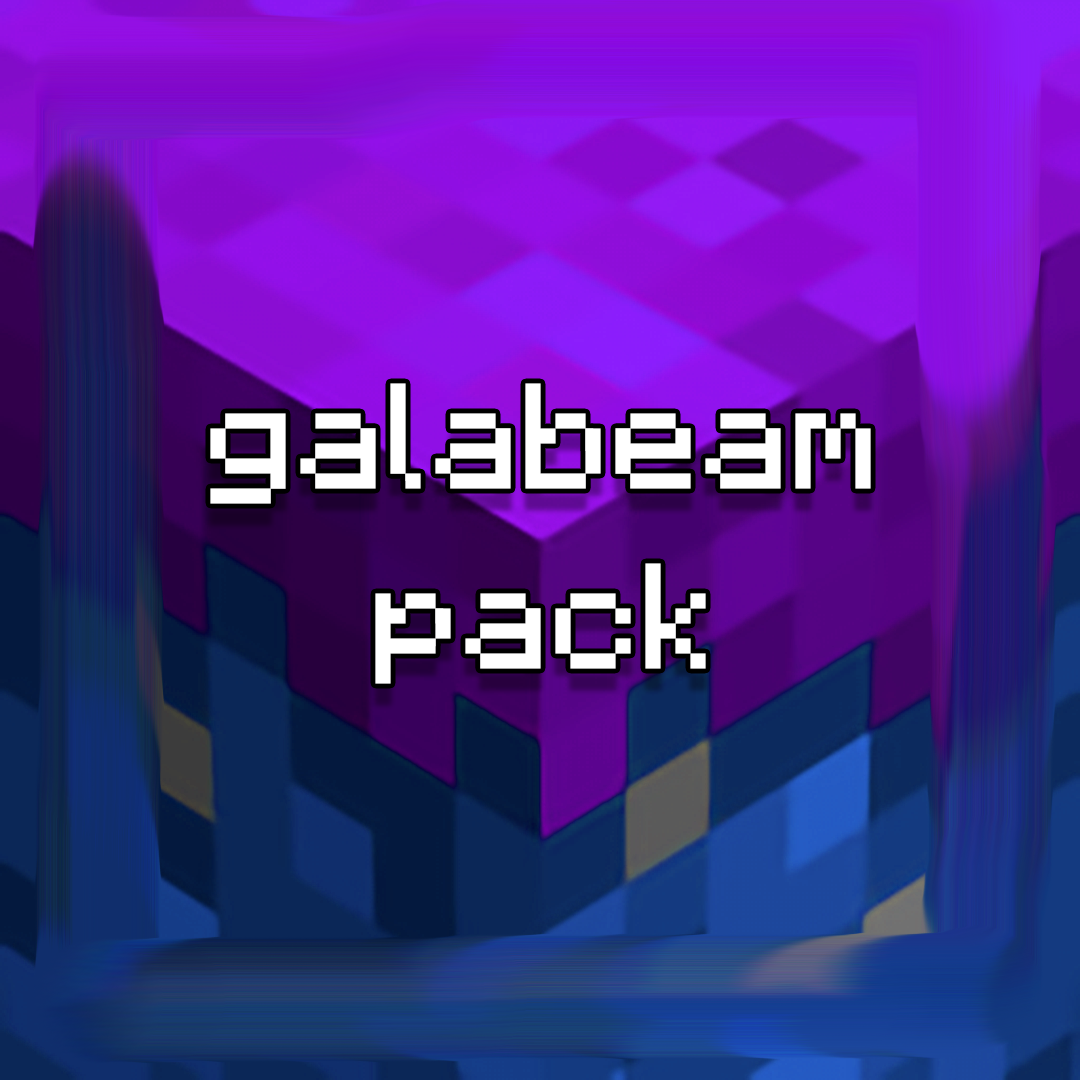
<style>
.page{position:relative;width:1080px;height:1080px}
.page>*{position:absolute;margin:0}
.t1{font:150px "Minecraft-Regular";color:#ffffff}
</style>
<div class="page">
<p class="t1" style="left:210px;top:383px;width:661px;height:301px;text-align:center">galabeam<br>pack</p>
</div>
